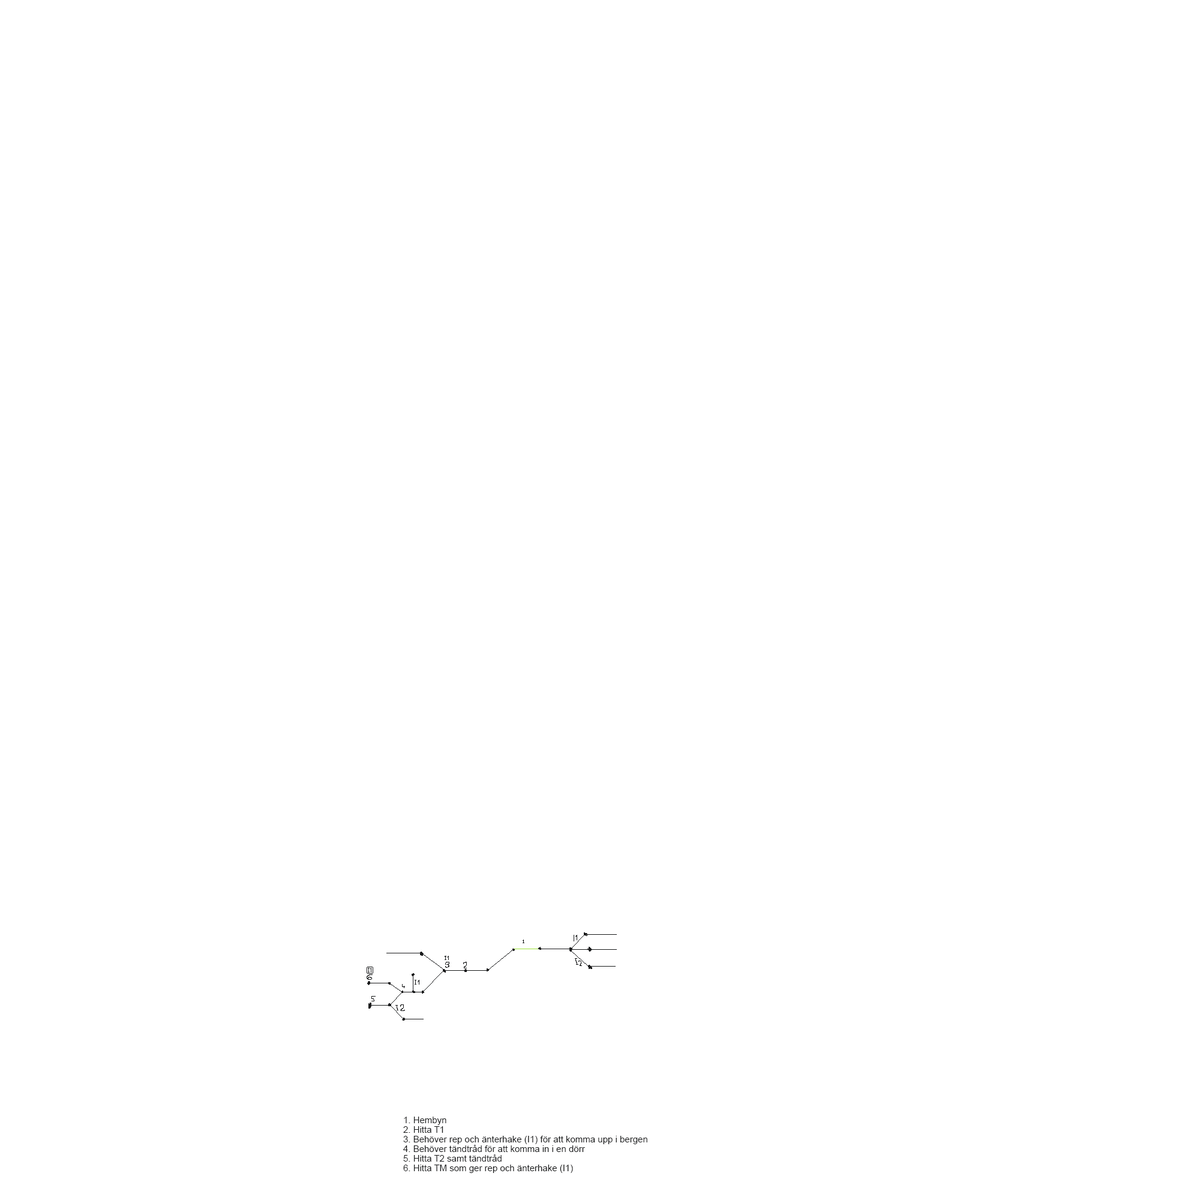
<style>
.page{position:relative;width:1200px;height:1200px;background:#ffffff}
.page>*{position:absolute;margin:0}
.t1{font:9px/9.6px "ArialMT";color:#1a1b1c}
.t2{font:9px/33.6px "ArialMT";color:#1a1b1c}
</style>
<div class="page">
<p class="t1" style="left:403px;top:1117px;width:244px;height:56px"><span class="t2">1. Hembyn</span><br>2. Hitta T1<br>3. Behöver rep och änterhake (I1) för att komma upp i bergen<br>4. Behöver tändtråd för att komma in i en dörr<br>5. Hitta T2 samt tändtråd<br>6. Hitta TM som ger rep och änterhake (I1)</p>
</div>
